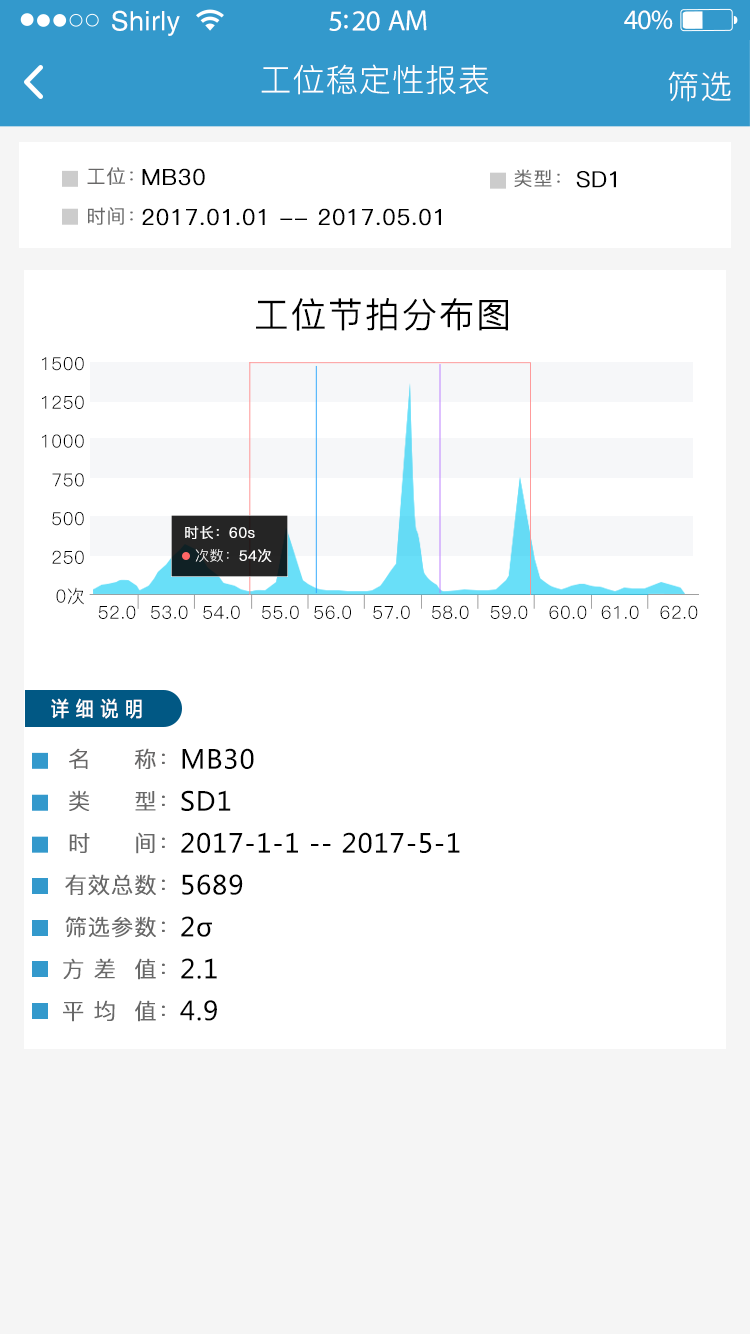
<style>
.page{position:relative;width:750px;height:1334px;background:#ffffff}
.page>*{position:absolute;margin:0}
.t1{font:26.8px "Helvetica";letter-spacing:0.02em;color:#ffffff}
.t2{font:29.1px "MyriadPro-Regular";letter-spacing:-0.02em;color:#ffffff}
.t3{font:27.9px "MyriadPro-Regular";letter-spacing:-0.02em;color:#ffffff}
.t4{font:32px "PingFang-SC-Regular";letter-spacing:0.03em;color:#ffffff}
.t5{font:19px/20px "PingFang-SC-Regular";letter-spacing:0.03em;color:#686767;font-weight:bold}
.t6{font:19px/20px "PingFang-SC-Regular";letter-spacing:0.03em;color:#686868;font-weight:bold}
.t7{font:22px/20px "PingFang-SC-Regular";letter-spacing:0.03em;color:#000000;font-weight:bold}
.t8{font:19px "PingFang-SC-Regular";letter-spacing:0.03em;color:#686868;font-weight:bold}
.t9{font:22px "PingFang-SC-Regular";letter-spacing:0.03em;color:#000000;font-weight:bold}
.t10{font:35px "PingFang-SC-Regular";letter-spacing:0.03em;color:#000000;font-weight:bold}
.t11{font:18px/19.4px "PingFang-SC-Regular";letter-spacing:0.03em;color:#000000}
.t12{font:14.2px "PingFang-SC-Regular";letter-spacing:0.03em;color:#ffffff;font-weight:bold}
.t13{font:14.2px "PingFang-SC-Regular";letter-spacing:0.03em;color:#ffffff}
.t14{font:18px "PingFang-SC-Regular";letter-spacing:0.03em;color:#000000}
.t15{font:20px "MicrosoftYaHei";letter-spacing:0.03em;color:#ffffff;font-weight:bold;scale:0.87 1}
.t16{font:22px/21px "PingFang-SC-Regular";letter-spacing:0.03em;color:#686868;font-weight:bold}
.t17{font:22px/21px "PingFang-SC-Regular";letter-spacing:0.03em;color:#686767;font-weight:bold}
.t18{font:26px/21px "MicrosoftYaHei";letter-spacing:0.03em;color:#000000}
</style>
<div class="page">
<p class="t1" style="left:112px;top:10px;width:68px;height:26px">Shirly</p>
<p class="t2" style="left:329px;top:10px;width:98px;height:21px">5:20 AM</p>
<p class="t3" style="left:624px;top:10px;width:49px;height:20px">40%</p>
<p class="t4" style="left:261px;top:64px;width:228px;height:31px">工位稳定性报表</p>
<p class="t4" style="left:668px;top:71px;width:63px;height:31px">筛选</p>
<p class="t5" style="left:87px;top:167px;width:46px;height:58px;text-align:right">工位：<br><br><span class="t6">时间：</span></p>
<p class="t7" style="left:142px;top:168px;width:299px;height:58px">MB30<br><br>2017.01.01 -- 2017.05.01</p>
<p class="t8" style="left:514px;top:169px;width:46px;height:18px">类型：</p>
<p class="t9" style="left:576px;top:171px;width:40px;height:17px">SD1</p>
<p class="t10" style="left:256px;top:298px;width:252px;height:33px">工位节拍分布图</p>
<p class="t11" style="left:42px;top:357px;width:42px;height:248px;text-align:right">1500<br><br>1250<br><br>1000<br><br>750<br><br>500<br><br>250<br><br>0次</p>
<p class="t12" style="left:185px;top:526px;width:70px;height:13px">时长：60s</p>
<p class="t13" style="left:195px;top:549px;width:77px;height:13px">次数：<span class="t12">54次</span></p>
<p class="t14" style="left:98px;top:605px;width:600px;height:14px">52.0  53.0  54.0   55.0  56.0   57.0   58.0   59.0   60.0  61.0   62.0</p>
<p class="t15" style="left:51px;top:698px;width:91px;height:21px">详 细 说 明</p>
<p class="t16" style="left:63px;top:748px;width:102px;height:274px;text-align:right"><span class="t17">名     称：<br><br></span>类     型：<br><br>时     间：<br><br>有效总数：<br><br>筛选参数：<br><br>方 差  值：<br><br>平 均  值：</p>
<p class="t18" style="left:180px;top:748px;width:280px;height:273px">MB30<br><br>SD1<br><br>2017-1-1 -- 2017-5-1<br><br>5689<br><br>2σ<br><br>2.1<br><br>4.9</p>
</div>
